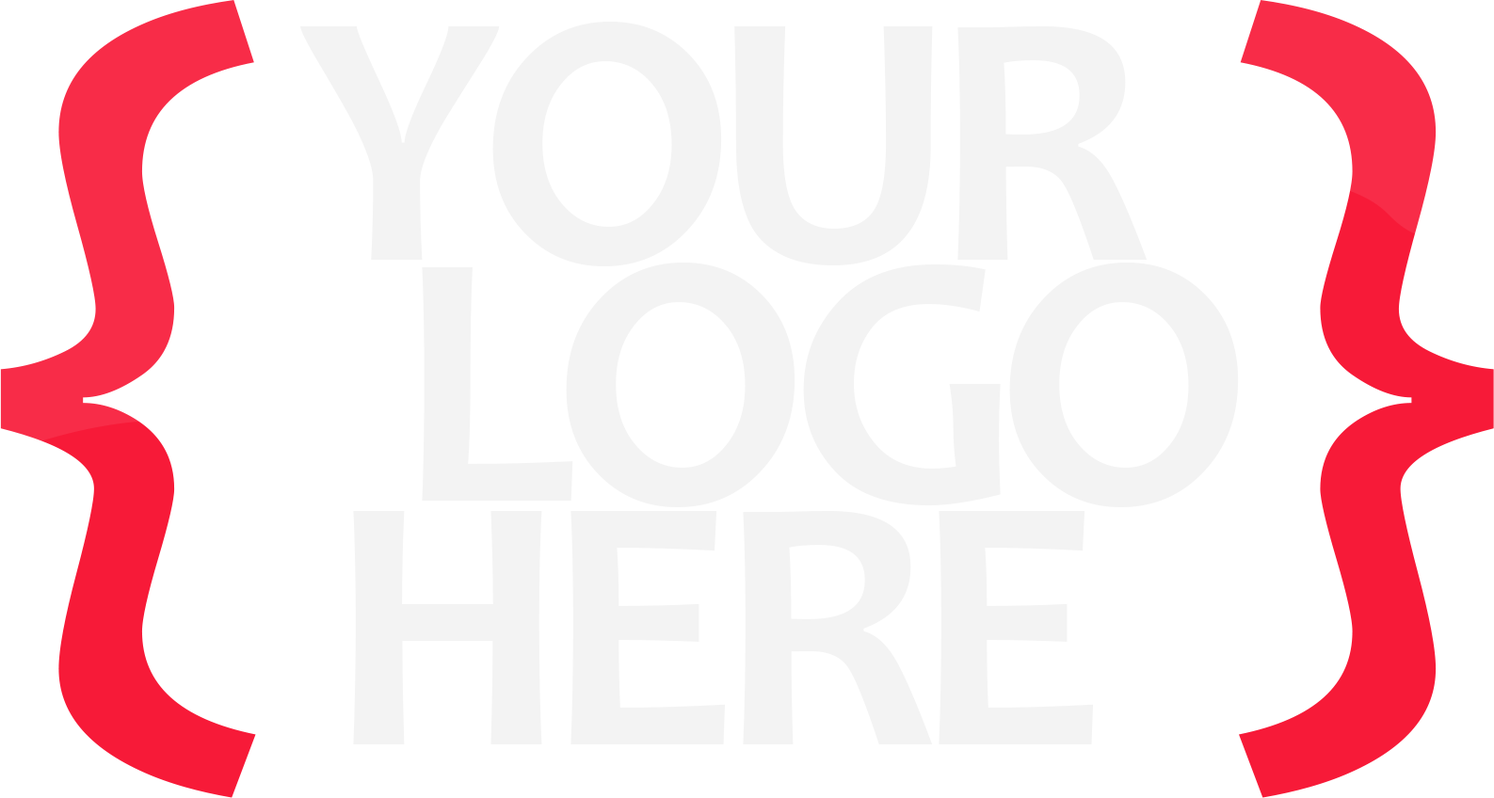
<style>
.page{position:relative;width:1494px;height:798px;background:#ffffff}
.page>*{position:absolute;margin:0}
.t1{font:367.1px "Candara-Bold";letter-spacing:-0.06em;color:#f3f3f3}
</style>
<div class="page">
<p class="t1" style="left:300px;top:22px;width:847px;height:244px">YOUR</p>
<p class="t1" style="left:422px;top:263px;width:817px;height:244px">LOGO</p>
<p class="t1" style="left:353px;top:511px;width:740px;height:234px">HERE</p>
</div>
